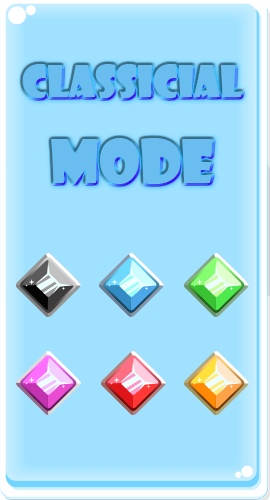
<style>
.page{position:relative;width:270px;height:500px;background:#9fe1ff}
.page>*{position:absolute;margin:0}
.t1{font:42px/20px "ShowcardGothic-Reg";color:#69beef}
.t2{font:42px/71px "ShowcardGothic-Reg";color:#69beef}
.t3{font:59px/20px "ShowcardGothic-Reg";color:#69beef}
</style>
<div class="page">
<p class="t1" style="left:22px;top:64px;width:220px;height:120px;text-align:center"><span class="t2">C</span>lassicial<br><span class="t3">Mode</span></p>
</div>
